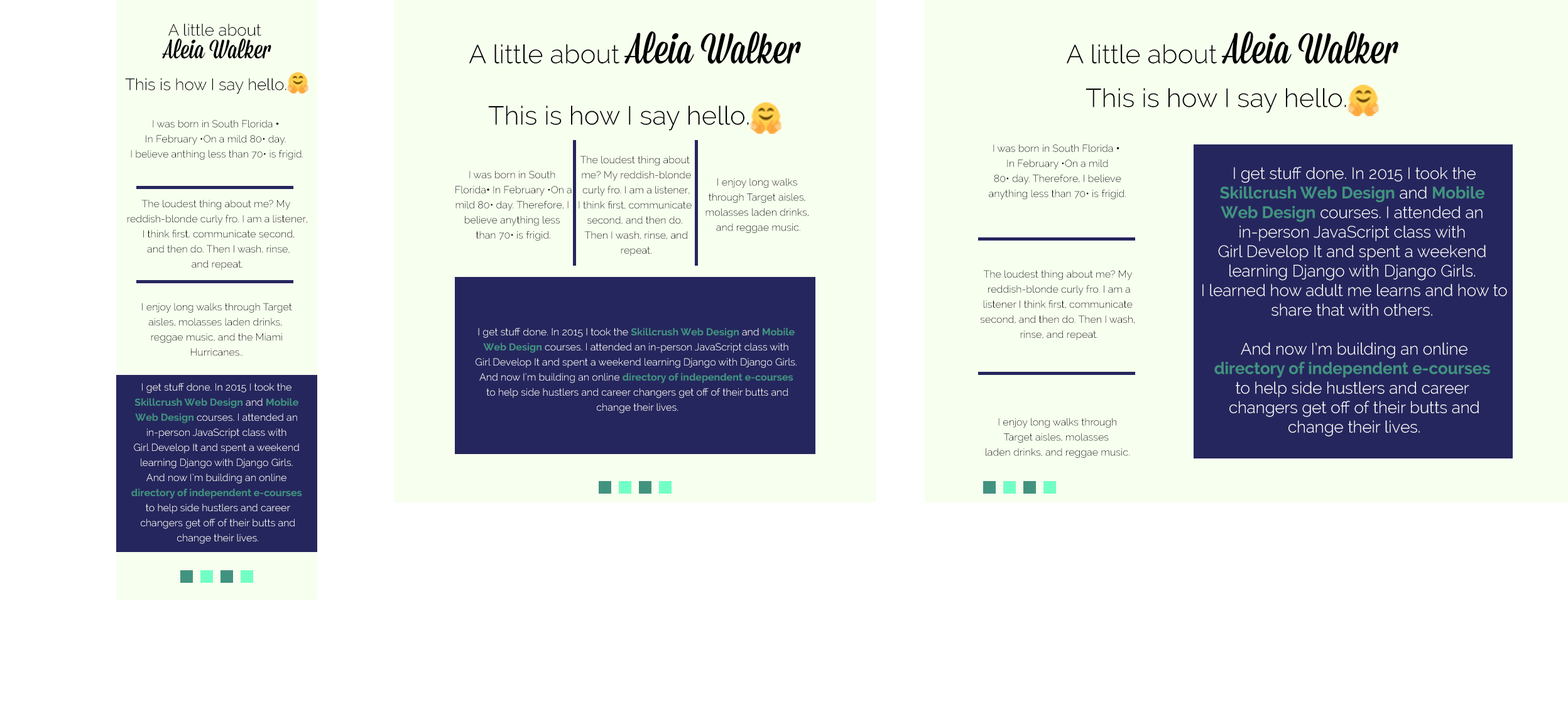
<style>
.page{position:relative;width:1568px;height:726px;background:#ffffff}
.page>*{position:absolute;margin:0}
.t1{font:16.3px/15.1px "Raleway-Light";color:#000000}
.t2{font:26.3px/22.6px "Mission-Script";color:#000000}
.t3{font:26.3px/15.1px "Mission-Script";color:#000000}
.t4{font:26.3px "Raleway-Light";color:#000000}
.t5{font:42.6px "Mission-Script";color:#000000}
.t6{font:16.3px "Raleway-Light";color:#000000}
.t7{font:10.1px/15.1px "Raleway-Light";color:#000000}
.t8{font:10.1px/15.1px "Helvetica";color:#000000}
.t9{font:16.3px "Raleway-Light";color:#ffffff}
.t10{font:16.3px "Raleway-Bold";color:#41937f}
.t11{font:10.1px/15.1px "Raleway-Light";color:#ffffff}
.t12{font:10.1px/15.1px "Raleway-Bold";color:#41937f}
</style>
<div class="page">
<p class="t1" style="left:162px;top:23px;width:109px;height:36px;text-align:center">A little about <br><span class="t2">Aleia Walk</span><span class="t3">er</span></p>
<p class="t4" style="left:469px;top:31px;width:332px;height:33px">A little about <span class="t5">Aleia Walk</span><span class="t5">er</span></p>
<p class="t4" style="left:1066px;top:31px;width:332px;height:33px">A little about <span class="t5">Aleia Walk</span><span class="t5">er</span></p>
<p class="t6" style="left:125px;top:78px;width:161px;height:16px">This is how I say hello.</p>
<p class="t4" style="left:1086px;top:88px;width:260px;height:25px">This is how I say hello.</p>
<p class="t4" style="left:488px;top:106px;width:261px;height:25px">This is how I say hello.</p>
<p class="t7" style="left:131px;top:120px;width:172px;height:40px;text-align:center">I was born in South Florida <span class="t8">• <br></span>In February •On a mild 80• day. <br>I believe anthing less than 70• is frigid.</p>
<p class="t7" style="left:989px;top:144px;width:137px;height:56px;text-align:center">I was born in South Florida <span class="t8">• <br></span>In February •On a mild<br>80• day. Therefore, I believe<br>anything less than 70• is frigid.</p>
<p class="t7" style="left:579px;top:156px;width:113px;height:100px;text-align:center">The loudest thing about <br>me? My reddish-blonde<br>curly fro. I am a listener,<br>I think first, communicate <br>second, and then do. <br>Then I wash, rinse, and<br>repeat.</p>
<p class="t7" style="left:455px;top:171px;width:117px;height:70px;text-align:center">I was born in South <br>Florida<span class="t8">• </span>In February •On a<br>mild 80• day. Therefore, I <br>believe anything less <br>than 70• is frigid.</p>
<p class="t9" style="left:1202px;top:166px;width:305px;height:271px;text-align:center">I get stuff done. In 2015 I took the<br><span class="t10">Skillcrush Web Design </span>and <span class="t10">Mobile <br>Web Design </span>courses. I attended an <br>in-person JavaScript class with <br>Girl Develop It and spent a weekend <br>learning Django with Django Girls. <br>I learned how adult me learns and how to<br>share that with others. <br><br>And now I’m building an online<br><span class="t10">directory of independent e-courses <br></span>to help side hustlers and career <br>changers get off of their butts and<br>change their lives.</p>
<p class="t7" style="left:705px;top:178px;width:103px;height:55px;text-align:center">I enjoy long walks <br>through Target aisles, <br>molasses laden drinks, <br>and reggae music.</p>
<p class="t7" style="left:127px;top:200px;width:180px;height:70px;text-align:center">The loudest thing about me? My <br>reddish-blonde curly fro. I am a listener,<br> I think first, communicate second,<br> and then do. Then I wash, rinse,<br>and repeat.</p>
<p class="t7" style="left:980px;top:270px;width:155px;height:70px;text-align:center">The loudest thing about me? My <br>reddish-blonde curly fro. I am a<br>listener I think first, communicate <br>second, and then do. Then I wash, <br>rinse, and repeat.</p>
<p class="t7" style="left:142px;top:303px;width:150px;height:53px;text-align:center">I enjoy long walks through Target<br>aisles, molasses laden drinks, <br>reggae music, and the Miami<br>Hurricanes..</p>
<p class="t11" style="left:476px;top:328px;width:321px;height:85px;text-align:center">I get stuff done. In 2015 I took the <span class="t12">Skillcrush Web Design </span>and <span class="t12">Mobile <br>Web Design </span>courses. I attended an in-person JavaScript class with <br>Girl Develop It and spent a weekend learning Django with Django Girls. <br>And now I’m building an online <span class="t12">directory of independent e-courses <br></span>to help side hustlers and career changers get off of their butts and<br>change their lives.</p>
<p class="t11" style="left:131px;top:383px;width:171px;height:161px;text-align:center">I get stuff done. In 2015 I took the <br><span class="t12">Skillcrush Web Design </span>and <span class="t12">Mobile <br>Web Design </span>courses. I attended an <br>in-person JavaScript class with <br>Girl Develop It and spent a weekend <br>learning Django with Django Girls. <br>And now I’m building an online <br><span class="t12">directory of independent e-courses <br></span>to help side hustlers and career<br>changers get off of their butts and<br>change their lives.</p>
<p class="t7" style="left:986px;top:418px;width:144px;height:40px;text-align:center">I enjoy long walks through<br>Target aisles, molasses <br>laden drinks, and reggae music.</p>
</div>
